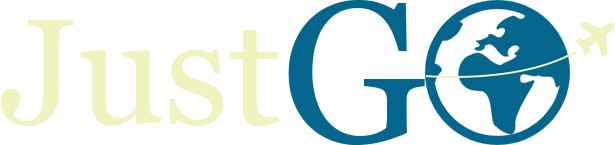
<style>
.page{position:relative;width:615px;height:145px;background:#ffffff}
.page>*{position:absolute;margin:0}
.t1{font:200px "Georgia";color:#05668d}
.t2{font:150px "Georgia";color:#f0f3bd}
</style>
<div class="page">
<p class="t1" style="left:288px;top:0px;width:137px;height:145px">G</p>
<p class="t2" style="left:0px;top:20px;width:279px;height:106px">Just</p>
</div>
